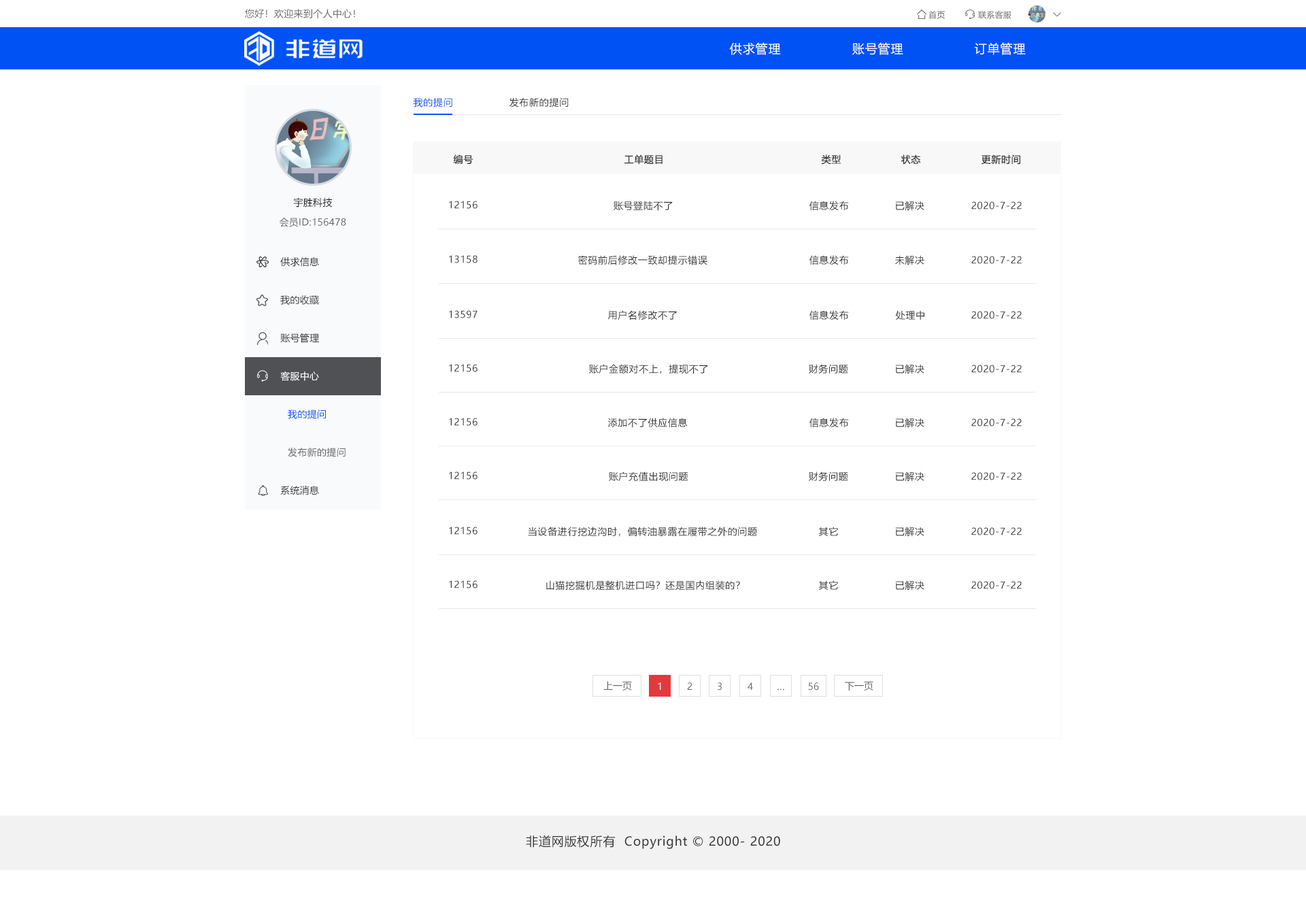
<style>
.page{position:relative;width:1306px;height:913px;background:#ffffff}
.page>*{position:absolute;margin:0}
.t1{font:9.5px "MicrosoftYaHei";letter-spacing:0.022em;color:#666666}
.t2{font:8.2px "MicrosoftYaHei";letter-spacing:0.022em;color:#666666}
.t3{font:12.2px "MicrosoftYaHei";letter-spacing:0.05em;color:#ffffff}
.t4{font:9.5px "MicrosoftYaHei";letter-spacing:0.05em;color:#0152f5}
.t5{font:9.5px "MicrosoftYaHei";letter-spacing:0.05em;color:#333333}
.t6{font:9.5px "MicrosoftYaHei";letter-spacing:0.022em;color:#141414}
.t7{font:9.5px "MicrosoftYaHei";letter-spacing:0.022em;color:#333333}
.t8{font:9.5px "MicrosoftYaHei";letter-spacing:0.022em;color:#ffffff}
.t9{font:9.5px "MicrosoftYaHei";letter-spacing:0.022em;color:#0152f5}
.t10{font:9.5px "MicrosoftYaHei";color:#666666}
.t11{font:9.5px "MicrosoftYaHei";color:#ffffff}
.t12{font:12.2px "MicrosoftYaHei";letter-spacing:0.05em;color:#333333}
</style>
<div class="page">
<p class="t1" style="left:245px;top:9px;width:110px;height:9px">您好！欢迎来到个人中心！</p>
<p class="t2" style="left:929px;top:11px;width:16px;height:8px">首页</p>
<p class="t2" style="left:978px;top:11px;width:34px;height:8px">联系客服</p>
<p class="t3" style="left:729px;top:42px;width:52px;height:13px">供求管理</p>
<p class="t3" style="left:852px;top:42px;width:51px;height:13px">账号管理</p>
<p class="t3" style="left:974px;top:42px;width:52px;height:13px">订单管理</p>
<p class="t4" style="left:413px;top:97px;width:39px;height:10px">我的提问</p>
<p class="t5" style="left:510px;top:97px;width:59px;height:10px">发布新的提问</p>
<p class="t5" style="left:453px;top:154px;width:20px;height:11px">编号</p>
<p class="t5" style="left:625px;top:154px;width:38px;height:11px">工单题目</p>
<p class="t5" style="left:821px;top:154px;width:21px;height:11px">类型</p>
<p class="t5" style="left:901px;top:154px;width:20px;height:11px">状态</p>
<p class="t5" style="left:981px;top:154px;width:39px;height:11px">更新时间</p>
<p class="t6" style="left:293px;top:197px;width:40px;height:10px">宇胜科技</p>
<p class="t5" style="left:449px;top:201px;width:29px;height:8px">12156</p>
<p class="t5" style="left:614px;top:201px;width:59px;height:10px">账号登陆不了</p>
<p class="t5" style="left:810px;top:201px;width:39px;height:9px">信息发布</p>
<p class="t5" style="left:895px;top:201px;width:30px;height:10px">已解决</p>
<p class="t5" style="left:971px;top:201px;width:51px;height:9px">2020-7-22</p>
<p class="t1" style="left:280px;top:218px;width:66px;height:9px">会员ID:156478</p>
<p class="t7" style="left:280px;top:257px;width:39px;height:10px">供求信息</p>
<p class="t5" style="left:449px;top:255px;width:29px;height:8px">13158</p>
<p class="t5" style="left:578px;top:255px;width:129px;height:10px">密码前后修改一致却提示错误</p>
<p class="t5" style="left:810px;top:255px;width:39px;height:10px">信息发布</p>
<p class="t5" style="left:895px;top:255px;width:30px;height:10px">未解决</p>
<p class="t5" style="left:971px;top:256px;width:51px;height:8px">2020-7-22</p>
<p class="t7" style="left:280px;top:295px;width:39px;height:10px">我的收藏</p>
<p class="t5" style="left:449px;top:310px;width:29px;height:8px">13597</p>
<p class="t5" style="left:608px;top:310px;width:69px;height:10px">用户名修改不了</p>
<p class="t5" style="left:810px;top:310px;width:39px;height:10px">信息发布</p>
<p class="t5" style="left:895px;top:310px;width:30px;height:10px">处理中</p>
<p class="t5" style="left:971px;top:311px;width:51px;height:8px">2020-7-22</p>
<p class="t7" style="left:280px;top:333px;width:39px;height:10px">账号管理</p>
<p class="t5" style="left:449px;top:364px;width:29px;height:8px">12156</p>
<p class="t5" style="left:589px;top:364px;width:119px;height:10px">账户金额对不上，提现不了</p>
<p class="t5" style="left:809px;top:364px;width:39px;height:9px">财务问题</p>
<p class="t5" style="left:895px;top:364px;width:30px;height:10px">已解决</p>
<p class="t5" style="left:971px;top:365px;width:51px;height:8px">2020-7-22</p>
<p class="t8" style="left:280px;top:371px;width:39px;height:10px">客服中心</p>
<p class="t9" style="left:288px;top:410px;width:38px;height:9px">我的提问</p>
<p class="t5" style="left:449px;top:418px;width:29px;height:8px">12156</p>
<p class="t5" style="left:608px;top:418px;width:80px;height:10px">添加不了供应信息</p>
<p class="t5" style="left:810px;top:418px;width:39px;height:9px">信息发布</p>
<p class="t5" style="left:895px;top:418px;width:30px;height:10px">已解决</p>
<p class="t5" style="left:971px;top:418px;width:51px;height:9px">2020-7-22</p>
<p class="t1" style="left:288px;top:448px;width:58px;height:9px">发布新的提问</p>
<p class="t5" style="left:449px;top:471px;width:29px;height:9px">12156</p>
<p class="t5" style="left:609px;top:471px;width:79px;height:11px">账户充值出现问题</p>
<p class="t5" style="left:809px;top:471px;width:39px;height:10px">财务问题</p>
<p class="t5" style="left:895px;top:471px;width:30px;height:11px">已解决</p>
<p class="t5" style="left:971px;top:472px;width:51px;height:8px">2020-7-22</p>
<p class="t7" style="left:280px;top:486px;width:39px;height:9px">系统消息</p>
<p class="t5" style="left:449px;top:527px;width:29px;height:8px">12156</p>
<p class="t5" style="left:528px;top:527px;width:229px;height:10px">当设备进行挖边沟时，偏转油暴露在履带之外的问题</p>
<p class="t5" style="left:818px;top:527px;width:20px;height:9px">其它</p>
<p class="t5" style="left:895px;top:527px;width:30px;height:10px">已解决</p>
<p class="t5" style="left:971px;top:527px;width:51px;height:8px">2020-7-22</p>
<p class="t5" style="left:449px;top:580px;width:29px;height:8px">12156</p>
<p class="t5" style="left:546px;top:580px;width:194px;height:10px">山猫挖掘机是整机进口吗？还是国内组装的？</p>
<p class="t5" style="left:818px;top:580px;width:20px;height:10px">其它</p>
<p class="t5" style="left:895px;top:580px;width:30px;height:10px">已解决</p>
<p class="t5" style="left:971px;top:581px;width:51px;height:8px">2020-7-22</p>
<p class="t10" style="left:603px;top:681px;width:29px;height:9px">上一页</p>
<p class="t11" style="left:658px;top:682px;width:3px;height:8px">1</p>
<p class="t10" style="left:687px;top:682px;width:6px;height:8px">2</p>
<p class="t10" style="left:718px;top:682px;width:4px;height:8px">3</p>
<p class="t10" style="left:748px;top:682px;width:5px;height:8px">4</p>
<p class="t10" style="left:778px;top:688px;width:6px;height:2px">…</p>
<p class="t10" style="left:808px;top:682px;width:11px;height:8px">56</p>
<p class="t10" style="left:845px;top:682px;width:28px;height:8px">下一页</p>
<p class="t12" style="left:526px;top:835px;width:254px;height:14px">非道网版权所有  Copyright © 2000- 2020</p>
</div>
